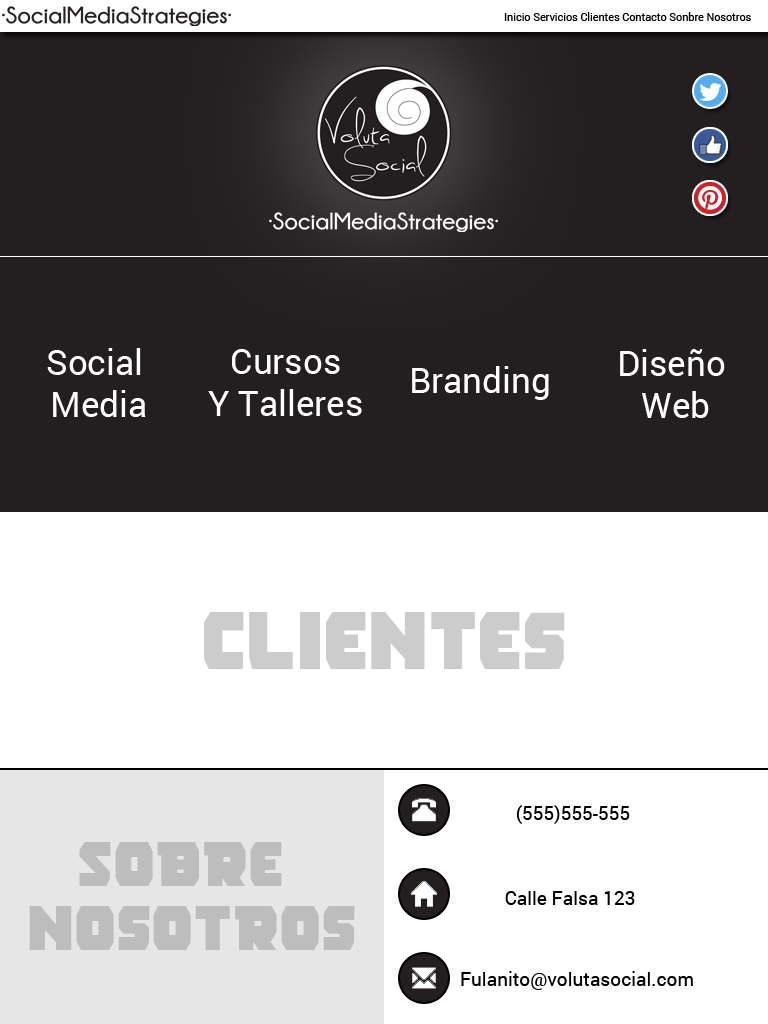
<style>
.page{position:relative;width:768px;height:1024px;background:#ffffff}
.page>*{position:absolute;margin:0}
.t1{font:10.8px "Roboto-Regular";color:#000000}
.t2{font:35px "Roboto-Regular";color:#ffffff}
.t3{font:67.8px "Rogue-Hero";color:#cccccc}
.t4{font:19.1px "Roboto-Regular";color:#000000}
.t5{font:53.1px "Rogue-Hero";color:#bdbdbd}
</style>
<div class="page">
<p class="t1" style="left:504px;top:12px;width:247px;height:9px">Inicio Servicios Clientes Contacto Sonbre Nosotros</p>
<p class="t2" style="left:47px;top:348px;width:99px;height:69px;text-align:center">Social <br>Media</p>
<p class="t2" style="left:208px;top:349px;width:154px;height:67px;text-align:center">Cursos<br>Y Talleres</p>
<p class="t2" style="left:620px;top:348px;width:105px;height:70px;text-align:center">Diseño <br>Web</p>
<p class="t2" style="left:412px;top:366px;width:137px;height:34px">Branding</p>
<p class="t3" style="left:204px;top:612px;width:361px;height:57px">Clientes</p>
<p class="t4" style="left:516px;top:805px;width:114px;height:19px">(555)555-555</p>
<p class="t5" style="left:29px;top:842px;width:326px;height:108px;text-align:center">Sobre <br>nosotros</p>
<p class="t4" style="left:505px;top:891px;width:130px;height:14px">Calle Falsa 123</p>
<p class="t4" style="left:461px;top:971px;width:232px;height:19px">Fulanito@volutasocial.com</p>
</div>
